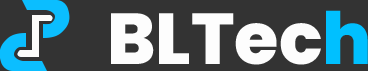
<style>
.page{position:relative;width:368px;height:71px;background:#333333}
.page>*{position:absolute;margin:0}
.t1{font:72px "Poppins-ExtraBold";color:#fdfdfd}
.t2{font:72px "Poppins-ExtraBold";color:#00c0ff}
</style>
<div class="page">
<p class="t1" style="left:111px;top:10px;width:257px;height:55px">BLTec<span class="t2">h</span></p>
</div>
